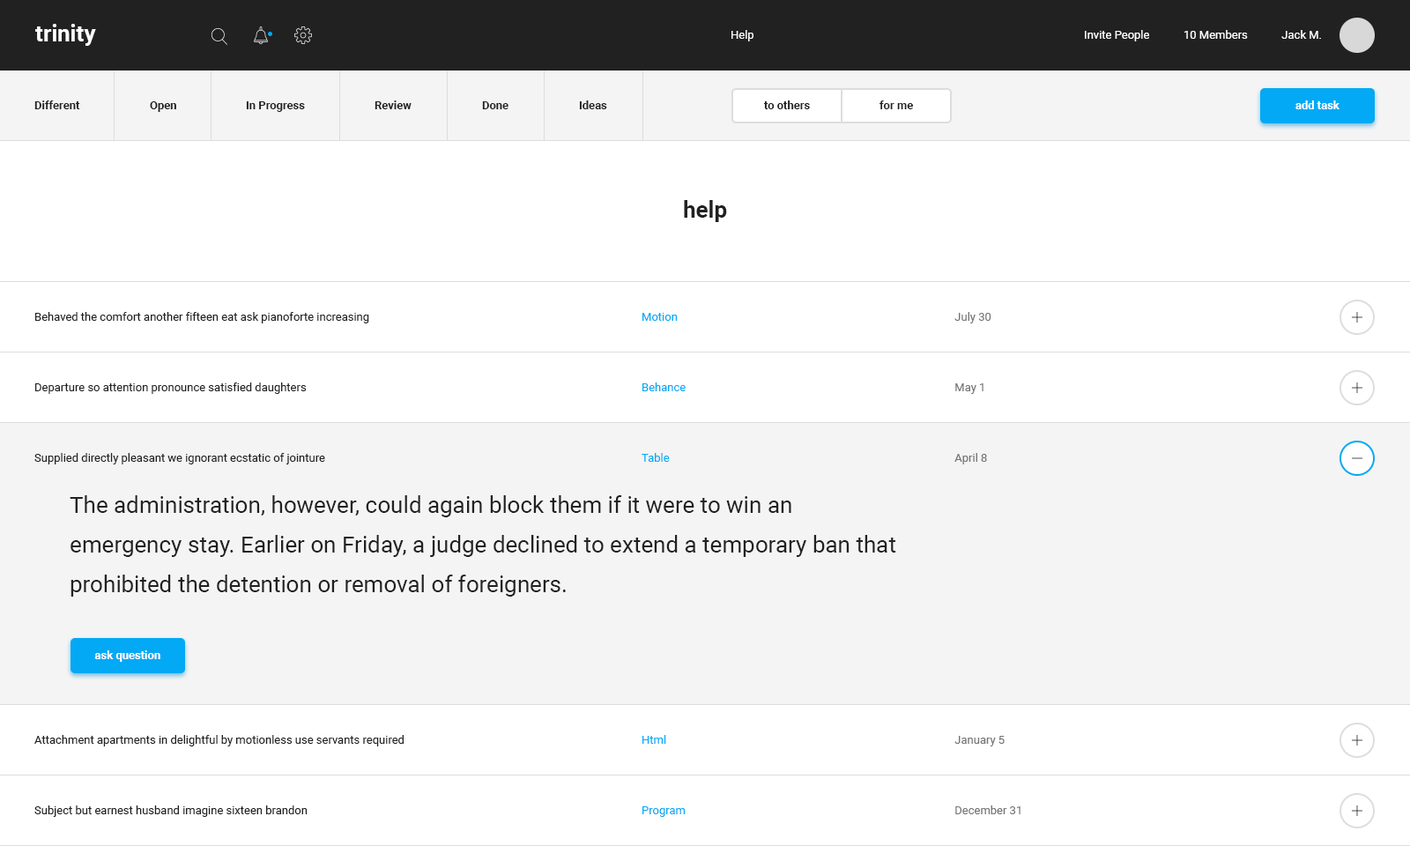
<style>
.page{position:relative;width:1410px;height:846px;background:#ffffff}
.page>*{position:absolute;margin:0}
.t1{font:22.9px "Roboto-Bold";color:#ffffff}
.t2{font:11.5px "Roboto-Regular";color:#ffffff}
.t3{font:11.5px "Roboto-Bold";color:#212121}
.t4{font:11.5px "Roboto-Bold";color:#ffffff}
.t5{font:22.9px "Roboto-Bold";color:#212121}
.t6{font:11.5px "Roboto-Regular";color:#212121}
.t7{font:11.5px "Roboto-Regular";color:#03a9f4}
.t8{font:11.5px "Roboto-Regular";color:#757575}
.t9{font:22.9px/39.6px "Roboto-Regular";color:#212121}
</style>
<div class="page">
<p class="t1" style="left:35px;top:24px;width:61px;height:22px">trinity</p>
<p class="t2" style="left:731px;top:30px;width:22px;height:11px">Help</p>
<p class="t2" style="left:1085px;top:30px;width:236px;height:11px">Invite People            10 Members            Jack M.</p>
<p class="t3" style="left:34px;top:100px;width:46px;height:9px">Different</p>
<p class="t3" style="left:150px;top:101px;width:26px;height:11px">Open</p>
<p class="t3" style="left:246px;top:101px;width:59px;height:11px">In Progress</p>
<p class="t3" style="left:374px;top:100px;width:37px;height:9px">Review</p>
<p class="t3" style="left:482px;top:101px;width:26px;height:8px">Done</p>
<p class="t3" style="left:579px;top:100px;width:28px;height:9px">Ideas</p>
<p class="t3" style="left:763px;top:100px;width:47px;height:9px">to others</p>
<p class="t3" style="left:879px;top:100px;width:34px;height:9px">for me</p>
<p class="t4" style="left:1295px;top:100px;width:44px;height:9px">add task</p>
<p class="t5" style="left:684px;top:200px;width:43px;height:22px">help</p>
<p class="t6" style="left:35px;top:312px;width:334px;height:11px">Behaved the comfort another fifteen eat ask pianoforte increasing</p>
<p class="t7" style="left:642px;top:313px;width:36px;height:8px">Motion</p>
<p class="t8" style="left:954px;top:312px;width:37px;height:11px">July 30</p>
<p class="t6" style="left:35px;top:382px;width:272px;height:12px">Departure so attention pronounce satisfied daughters</p>
<p class="t7" style="left:642px;top:382px;width:43px;height:9px">Behance</p>
<p class="t8" style="left:955px;top:383px;width:28px;height:11px">May 1</p>
<p class="t6" style="left:34px;top:453px;width:291px;height:11px">Supplied directly pleasant we ignorant ecstatic of jointure</p>
<p class="t7" style="left:641px;top:453px;width:29px;height:9px">Table</p>
<p class="t8" style="left:954px;top:453px;width:33px;height:11px">April 8</p>
<p class="t9" style="left:70px;top:495px;width:826px;height:101px">The administration, however, could again block them if it were to win an<br>emergency stay. Earlier on Friday, a judge declined to extend a temporary ban that prohibited the detention or removal of foreigners.</p>
<p class="t4" style="left:94px;top:650px;width:66px;height:12px">ask question</p>
<p class="t6" style="left:34px;top:735px;width:370px;height:11px">Attachment apartments in delightful by motionless use servants required</p>
<p class="t7" style="left:642px;top:735px;width:24px;height:9px">Html</p>
<p class="t8" style="left:954px;top:736px;width:50px;height:10px">January 5</p>
<p class="t6" style="left:34px;top:805px;width:274px;height:12px">Subject but earnest husband imagine sixteen brandon</p>
<p class="t7" style="left:642px;top:806px;width:43px;height:11px">Program</p>
<p class="t8" style="left:955px;top:805px;width:65px;height:9px">December 31</p>
</div>
